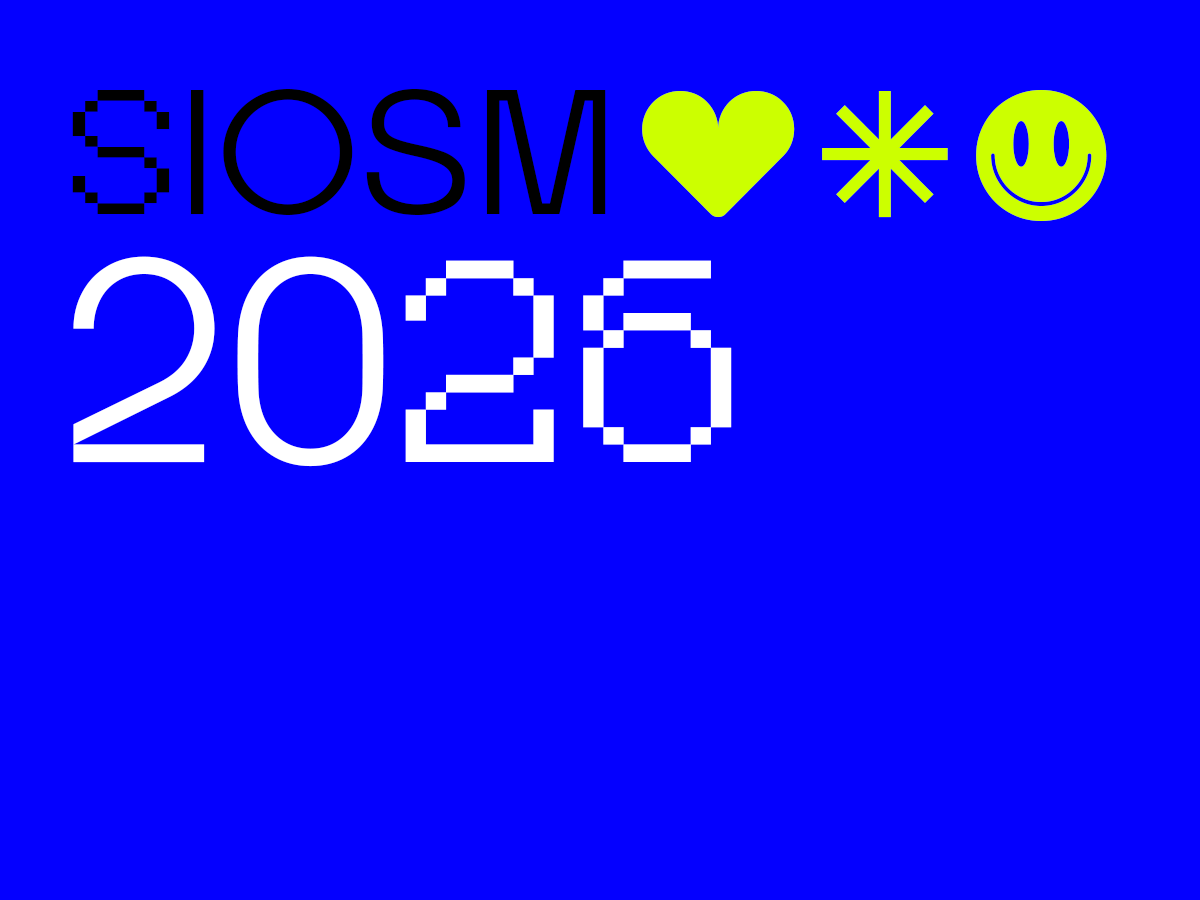
<style>
.page{position:relative;width:1200px;height:900px;background:#0400ff}
.page>*{position:absolute;margin:0}
.t1{font:177px "FT-Activica-Strong";color:#000000}
.t2{font:177px "FT-Activica-Pixel";color:#000000}
.t3{font:177px "FT-Activica-Normal";color:#000000}
.t4{font:179.2px "FT-Activica-Symbols";color:#ccff00}
.t5{font:287.6px "FT-Activica-Strong";color:#ffffff}
.t6{font:287.6px "FT-Activica-Pixel";color:#ffffff}
</style>
<div class="page">
<p class="t1" style="left:72px;top:89px;width:534px;height:126px"><span class="t2">S</span>io<span class="t3">s</span>m</p>
<p class="t4" style="left:642px;top:90px;width:465px;height:131px">c4o</p>
<p class="t5" style="left:73px;top:256px;width:659px;height:211px">20<span class="t6">26</span></p>
</div>
